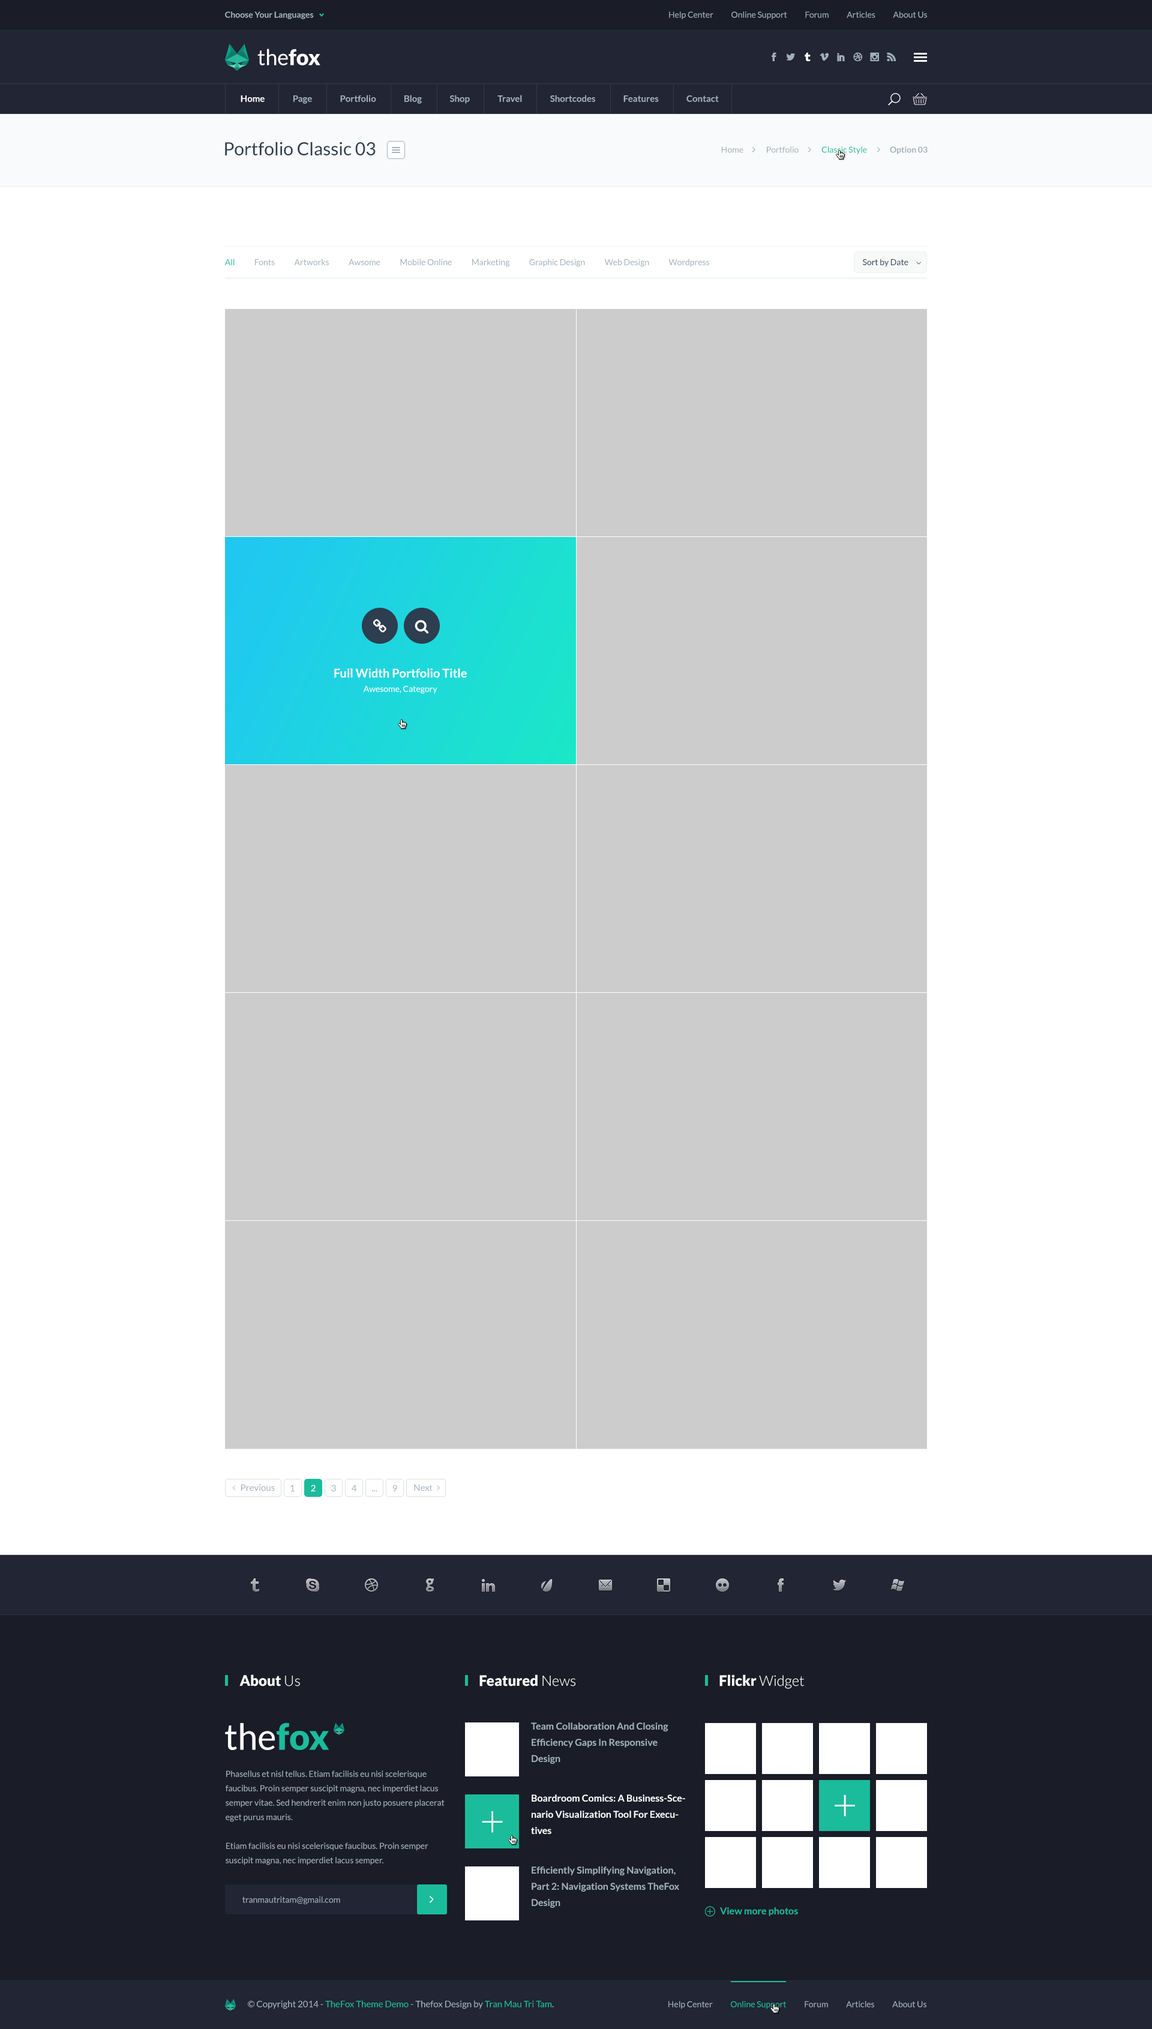
<style>
.page{position:relative;width:1152px;height:2029px;background:#ffffff}
.page>*{position:absolute;margin:0}
.t1{font:8.4px "Lato-Bold";color:#a1b1bc}
.t2{font:8.4px "Lato-Regular";color:#a1b1bc}
.t3{font:21.6px "Lato-Regular";color:#ffffff}
.t4{font:21.6px "Lato-Black";color:#ffffff}
.t5{font:9px "Lato-Bold";color:#a1b1bc}
.t6{font:9px "Lato-Bold";color:#ffffff}
.t7{font:18px "Lato-Regular";color:#2c3e50}
.t8{font:8.4px "Lato-Regular";color:#1abc9c}
.t9{font:8.4px "Lato-Regular";color:#2c3e50}
.t10{font:12px/14.4px "Lato-Bold";color:#ffffff}
.t11{font:8.4px/14.4px "Lato-Regular";color:#ffffff}
.t12{font:9px "Lato-Regular";color:#a1b1bc}
.t13{font:9px "Lato-Regular";color:#ffffff}
.t14{font:14.4px "Lato-Black";color:#ffffff}
.t15{font:14.4px "Lato-Light";color:#ffffff}
.t16{font:36px "Lato-Regular";color:#ffffff}
.t17{font:36px "Lato-Black";color:#1abc9c}
.t18{font:9.6px/16.2px "Lato-Bold";color:#a1b1bc}
.t19{font:8.4px/14.4px "Lato-Regular";color:#a1b1bc}
.t20{font:9.6px/16.2px "Lato-Bold";color:#ffffff}
.t21{font:43.2px "Lato-Light";color:#ffffff}
.t22{font:9.6px "Lato-Bold";color:#1abc9c}
.t23{font:9px "Lato-Regular";color:#1abc9c}
</style>
<div class="page">
<p class="t1" style="left:225px;top:11px;width:89px;height:8px">Choose Your Languages</p>
<p class="t2" style="left:669px;top:11px;width:258px;height:8px">Help Center           Online Support           Forum           Articles           About Us</p>
<p class="t3" style="left:257px;top:49px;width:63px;height:16px">the<span class="t4">fox</span></p>
<p class="t5" style="left:241px;top:95px;width:478px;height:9px"><span class="t6">Home</span>                Page                Portfolio                Blog                Shop                Travel                Shortcodes                Features                Contact</p>
<p class="t7" style="left:225px;top:142px;width:151px;height:13px">Portfolio Classic 03</p>
<p class="t2" style="left:722px;top:146px;width:206px;height:8px">Home              Portfolio              <span class="t8">Classic Style              </span><span class="t1">Option 03</span></p>
<p class="t2" style="left:224px;top:259px;width:485px;height:8px"><span class="t8">All</span>            Fonts            Artworks            Awsome            Mobile Online            Marketing            Graphic Design            Web Design            Wordpress</p>
<p class="t9" style="left:863px;top:259px;width:45px;height:8px">Sort by Date</p>
<p class="t10" style="left:334px;top:668px;width:133px;height:26px;text-align:center">Full Width Portfolio Title<br><span class="t11">Awesome, Category</span></p>
<p class="t12" style="left:241px;top:1484px;width:34px;height:7px">Previous</p>
<p class="t12" style="left:290px;top:1485px;width:5px;height:7px">1</p>
<p class="t13" style="left:311px;top:1485px;width:5px;height:7px">2</p>
<p class="t12" style="left:331px;top:1485px;width:5px;height:7px">3</p>
<p class="t12" style="left:352px;top:1485px;width:5px;height:7px">4</p>
<p class="t12" style="left:372px;top:1490px;width:5px;height:2px">...</p>
<p class="t12" style="left:392px;top:1485px;width:5px;height:7px">9</p>
<p class="t12" style="left:414px;top:1484px;width:19px;height:7px">Next</p>
<p class="t14" style="left:239px;top:1675px;width:61px;height:12px">About <span class="t15">Us</span></p>
<p class="t14" style="left:479px;top:1675px;width:96px;height:12px">Featured <span class="t15">News</span></p>
<p class="t14" style="left:719px;top:1675px;width:85px;height:14px">Flickr <span class="t15">Widget</span></p>
<p class="t16" style="left:225px;top:1723px;width:104px;height:27px">the<span class="t17">fox</span></p>
<p class="t18" style="left:531px;top:1723px;width:137px;height:41px">Team Collaboration And Closing Efficiency Gaps In Responsive Design</p>
<p class="t19" style="left:226px;top:1771px;width:219px;height:94px">Phasellus et nisl tellus. Etiam facilisis eu nisi scelerisque faucibus. Proin semper suscipit magna, nec imperdiet lacus semper vitae. Sed hendrerit enim non justo posuere placerat eget purus mauris.<br><br>Etiam facilisis eu nisi scelerisque faucibus. Proin semper suscipit magna, nec imperdiet lacus semper.</p>
<p class="t20" style="left:531px;top:1795px;width:154px;height:39px">Boardroom Comics: A Business-Scenario Visualization Tool For Executives</p>
<p class="t21" style="left:835px;top:1795px;width:20px;height:22px">+</p>
<p class="t21" style="left:482px;top:1811px;width:21px;height:22px">+</p>
<p class="t18" style="left:532px;top:1867px;width:147px;height:41px">Efficiently Simplifying Navigation, Part 2: Navigation Systems TheFox Design</p>
<p class="t2" style="left:242px;top:1897px;width:98px;height:7px">tranmautritam@gmail.com</p>
<p class="t22" style="left:720px;top:1907px;width:78px;height:9px">View more photos</p>
<p class="t12" style="left:248px;top:2000px;width:306px;height:9px">© Copyright 2014 - <span class="t23">TheFox Theme Demo</span> - Thefox Design by <span class="t23">Tran Mau Tri Tam</span>.</p>
<p class="t2" style="left:668px;top:2001px;width:258px;height:8px">Help Center           <span class="t8">Online Support</span>           Forum           Articles           About Us</p>
</div>
